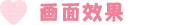
<style>
.page{position:relative;width:195px;height:25px;background:#ffffff}
.page>*{position:absolute;margin:0}
.t1{font:21.2px "shetumodengxiaofangti";color:#ef8299;font-weight:bold}
</style>
<div class="page">
<p class="t1" style="left:40px;top:2px;width:83px;height:20px">画面效果</p>
</div>
